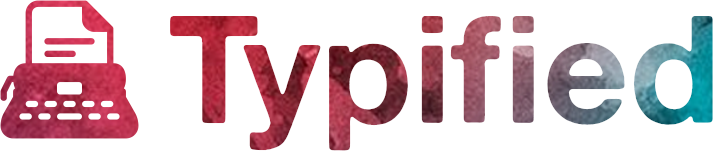
<style>
.page{position:relative;width:713px;height:151px;background:#ffffff}
.page>*{position:absolute;margin:0}
.t1{font:150px "AlteHaasGrotesk_Bold"}
</style>
<div class="page">
<p class="t1" style="left:170px;top:16px;width:543px;height:135px">Typified</p>
</div>
